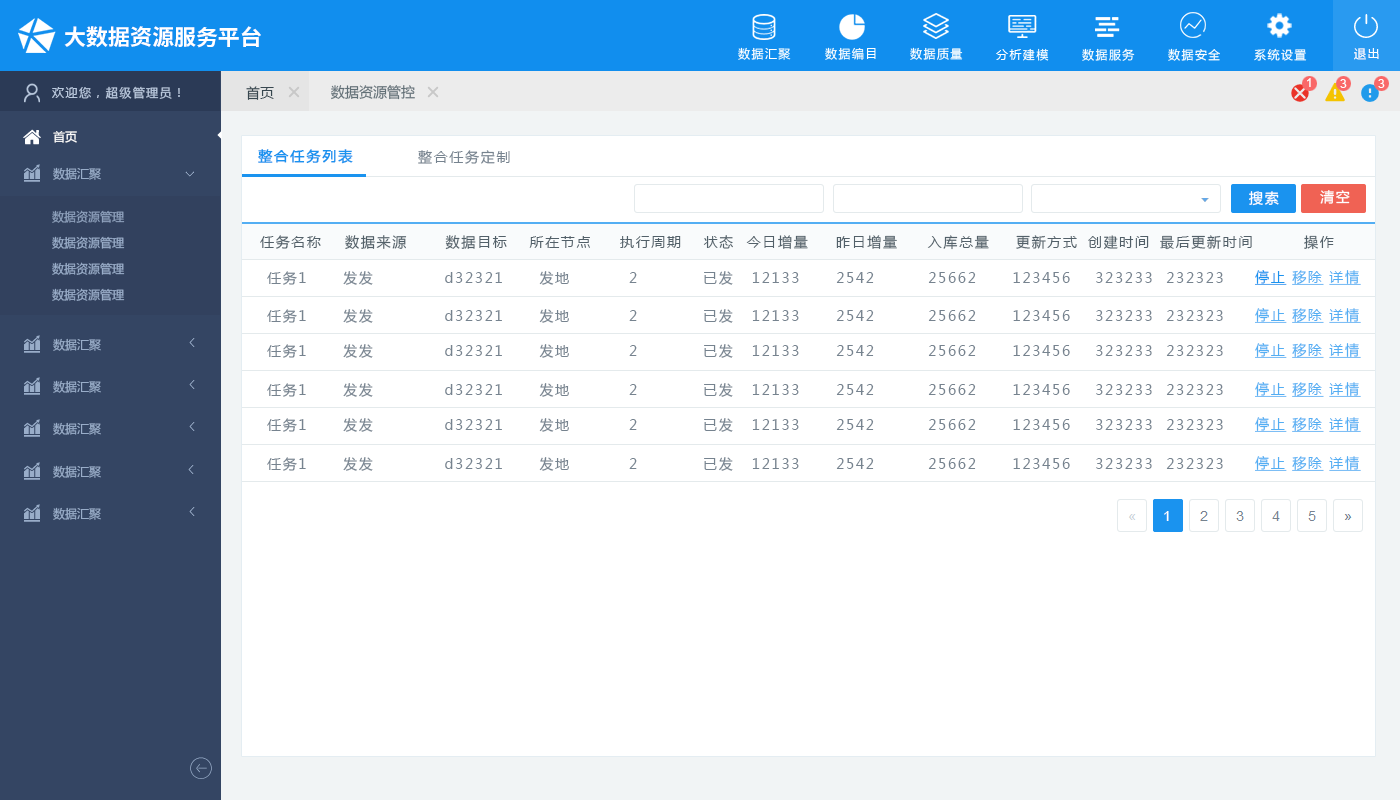
<style>
.page{position:relative;width:1400px;height:800px;background:#ffffff}
.page>*{position:absolute;margin:0}
.t1{font:14px "MicrosoftYaHei";letter-spacing:0.12em;color:#1a93ef;font-weight:bold}
.t2{font:14px "MicrosoftYaHei";letter-spacing:0.12em;color:#76838f}
.t3{font:14px "MicrosoftYaHei";letter-spacing:0.12em;color:#ffffff}
.t4{font:14px "MicrosoftYaHei";letter-spacing:0.12em;color:#526069}
.t5{font:14px "MicrosoftYaHei";letter-spacing:0.12em;color:#53aef3;text-decoration:underline}
.t6{font:14px "MicrosoftYaHei";letter-spacing:0.12em;color:#53aef3}
.t7{font:14px "MicrosoftYaHei";letter-spacing:0.12em;color:#1a93ef;text-decoration:underline}
.t8{font:14px "ArialMT";letter-spacing:0.12em;color:#ffffff}
</style>
<div class="page">
<p class="t1" style="left:258px;top:149px;width:95px;height:15px">整合任务列表</p>
<p class="t2" style="left:418px;top:150px;width:92px;height:14px">整合任务定制</p>
<p class="t3" style="left:1249px;top:191px;width:30px;height:15px">搜索</p>
<p class="t3" style="left:1320px;top:190px;width:30px;height:14px">清空</p>
<p class="t4" style="left:260px;top:235px;width:1074px;height:15px">任务名称   数据来源  数据目标    所在节点 执行周期   状态  今日增量   昨日增量     入库总量  更新方式 创建时间 最后更新时间     操作</p>
<p class="t5" style="left:1255px;top:270px;width:106px;height:15px"><span class="t6"> </span><span class="t7">停止 </span>移除 详情</p>
<p class="t2" style="left:267px;top:271px;width:956px;height:14px">任务1      发发            d32321      发地          2           已发   12133      2542         25662      123456    323233  232323</p>
<p class="t2" style="left:267px;top:309px;width:956px;height:14px">任务1      发发            d32321      发地          2           已发   12133      2542         25662      123456    323233  232323</p>
<p class="t5" style="left:1255px;top:308px;width:106px;height:15px"><span class="t6"> </span>停止 移除 详情</p>
<p class="t2" style="left:267px;top:344px;width:956px;height:14px">任务1      发发            d32321      发地          2           已发   12133      2542         25662      123456    323233  232323</p>
<p class="t5" style="left:1255px;top:343px;width:106px;height:15px"><span class="t6"> </span>停止 移除 详情</p>
<p class="t2" style="left:267px;top:383px;width:956px;height:14px">任务1      发发            d32321      发地          2           已发   12133      2542         25662      123456    323233  232323</p>
<p class="t5" style="left:1255px;top:382px;width:106px;height:15px"><span class="t6"> </span>停止 移除 详情</p>
<p class="t2" style="left:267px;top:418px;width:956px;height:14px">任务1      发发            d32321      发地          2           已发   12133      2542         25662      123456    323233  232323</p>
<p class="t5" style="left:1255px;top:417px;width:106px;height:15px"><span class="t6"> </span>停止 移除 详情</p>
<p class="t2" style="left:267px;top:457px;width:956px;height:14px">任务1      发发            d32321      发地          2           已发   12133      2542         25662      123456    323233  232323</p>
<p class="t5" style="left:1255px;top:456px;width:106px;height:15px"><span class="t6"> </span>停止 移除 详情</p>
<p class="t8" style="left:1164px;top:511px;width:5px;height:10px">1</p>
</div>
